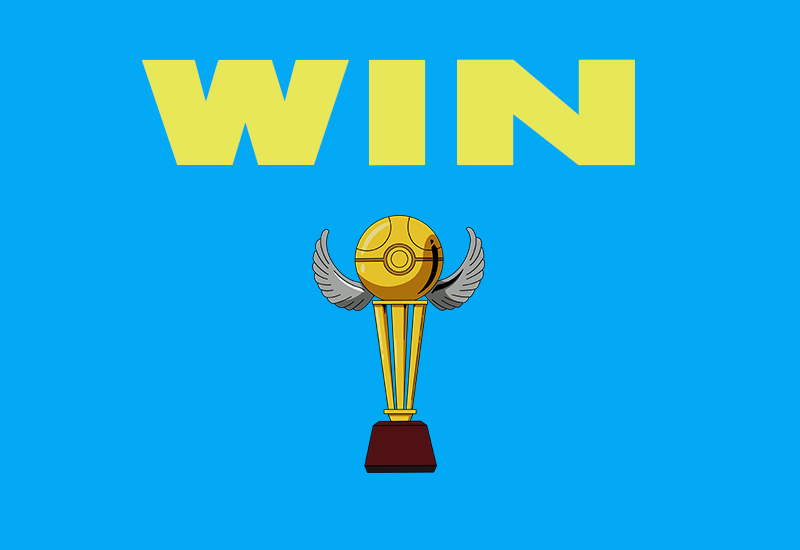
<style>
.page{position:relative;width:800px;height:550px;background:#03a9f4}
.page>*{position:absolute;margin:0}
.t1{font:150px "MarioKartF2";color:#e7e757}
</style>
<div class="page">
<p class="t1" style="left:142px;top:59px;width:493px;height:107px">WIN</p>
</div>
